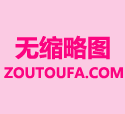
<style>
.page{position:relative;width:125px;height:114px;background:#fbcae3}
.page>*{position:absolute;margin:0}
.t1{font:24px "MicrosoftYaHei-Bold";color:#fb0580}
.t2{font:14px "MicrosoftYaHei-Bold";color:#fb0580}
</style>
<div class="page">
<p class="t1" style="left:15px;top:35px;width:95px;height:25px">无缩略图</p>
<p class="t2" style="left:4px;top:67px;width:119px;height:12px">ZOUTOUFA.COM</p>
</div>
